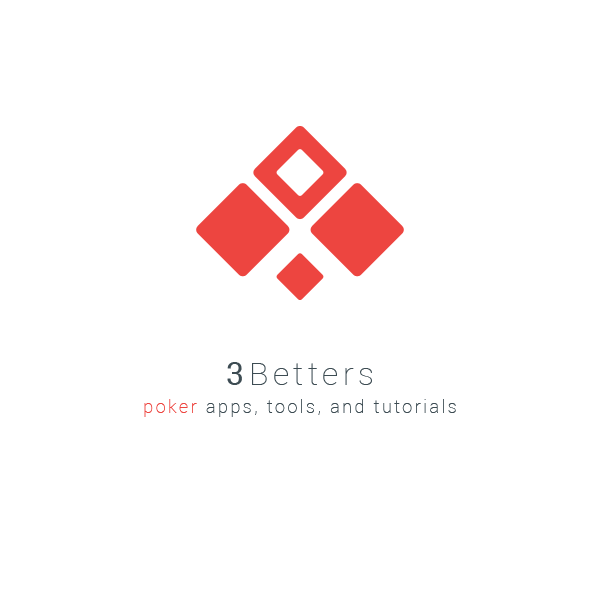
<style>
.page{position:relative;width:600px;height:600px;background:#ffffff}
.page>*{position:absolute;margin:0}
.t1{font:18px/28px "Roboto-Thin";letter-spacing:0.14em;color:#3d4c53}
.t2{font:32px/28px "Roboto-Regular";letter-spacing:0.14em;color:#3d4c53}
.t3{font:32px/28px "Roboto-Thin";letter-spacing:0.14em;color:#3d4c53}
.t4{font:18px/28px "Roboto-Thin";letter-spacing:0.14em;color:#ed4540}
</style>
<div class="page">
<p class="t1" style="left:144px;top:362px;width:312px;height:55px;text-align:center"><span class="t2">3</span><span class="t3">Betters<br></span><span class="t4">poker</span> apps, tools, and tutorials</p>
</div>
